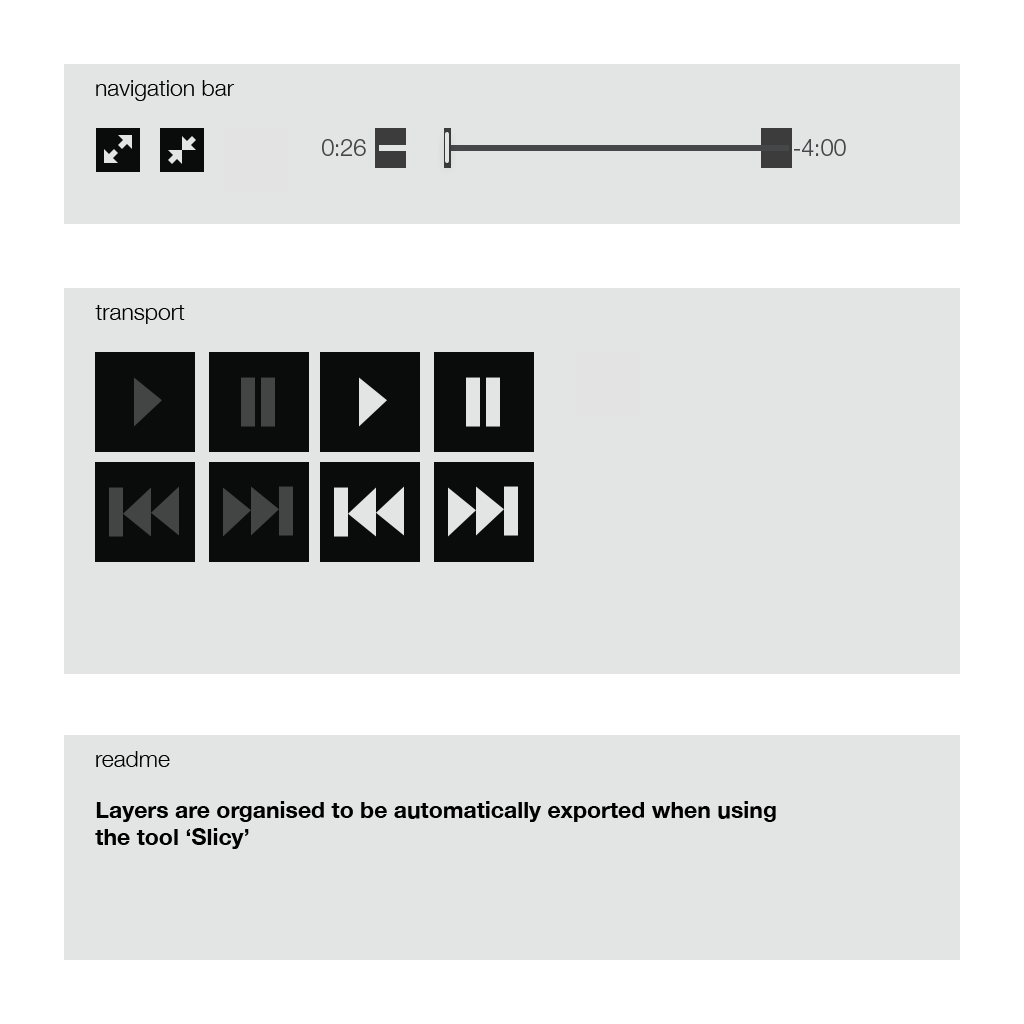
<style>
.page{position:relative;width:1024px;height:1024px;background:#e3e4e4}
.page>*{position:absolute;margin:0}
.t1{font:23px "HelveticaNeue-Light";color:#000000}
.t2{font:23px "HelveticaNeueLTStd-Lt";color:#464749}
.t3{font:23px "HelveticaNeue-Bold";color:#000000}
</style>
<div class="page">
<p class="t1" style="left:96px;top:80px;width:139px;height:21px">navigation bar</p>
<p class="t2" style="left:322px;top:139px;width:44px;height:17px">0:26</p>
<p class="t2" style="left:794px;top:139px;width:52px;height:17px">-4:00</p>
<p class="t1" style="left:95px;top:305px;width:90px;height:19px">transport</p>
<p class="t1" style="left:96px;top:751px;width:74px;height:16px">readme</p>
<p class="t3" style="left:95px;top:801px;width:681px;height:48px">Layers are organised to be automatically exported when using<br>the tool ‘Slicy’</p>
</div>
